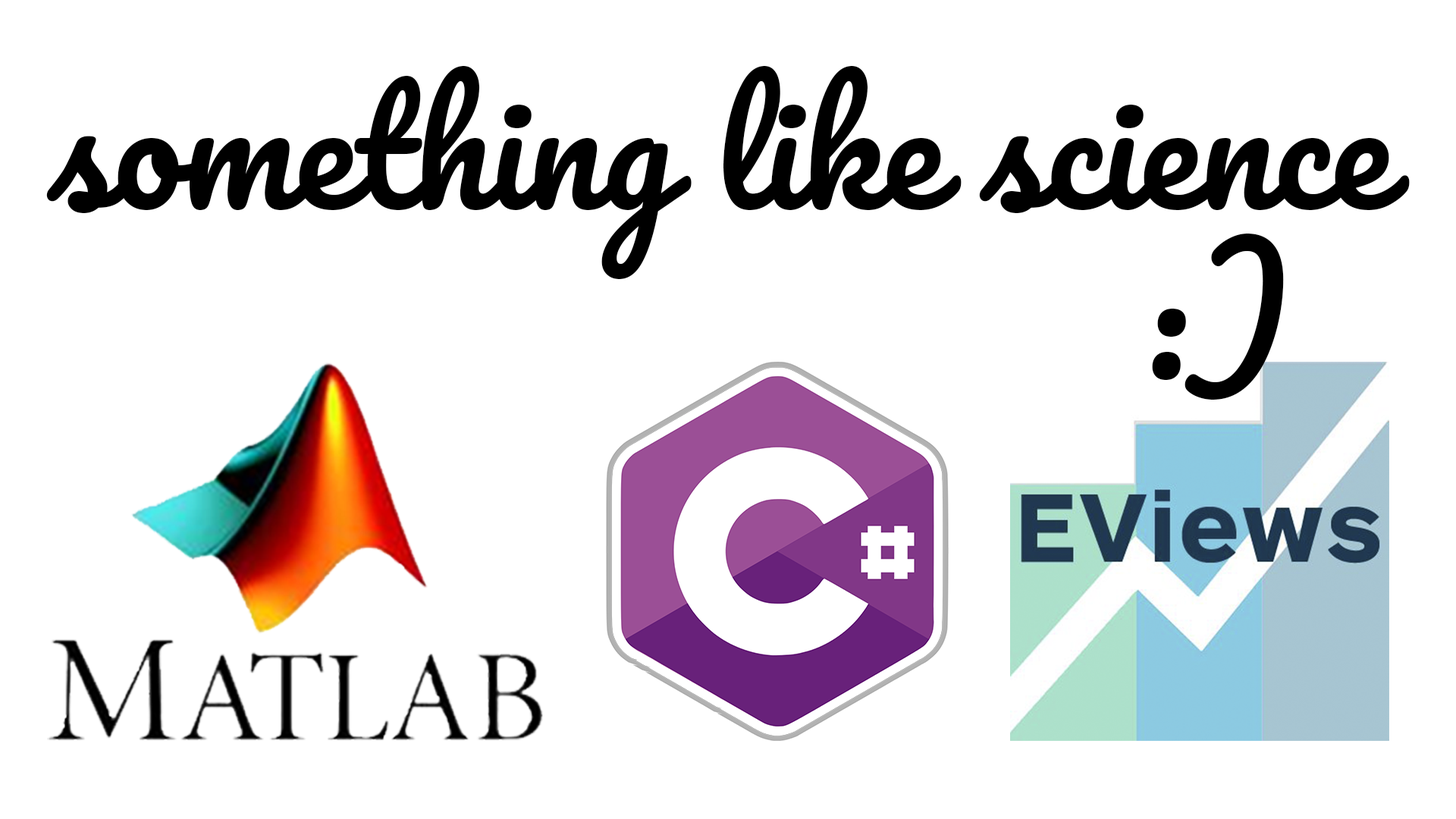
<style>
.page{position:relative;width:1456px;height:819px;background:#ffffff}
.page>*{position:absolute;margin:0}
.t1{font:151.7px "Pacifico-Regular";color:#000000}
</style>
<div class="page">
<p class="t1" style="left:46px;top:66px;width:1364px;height:213px">something like science</p>
<p class="t1" style="left:1152px;top:234px;width:132px;height:166px">:)</p>
</div>
